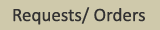
<style>
.page{position:relative;width:160px;height:30px;background:#cfc9ab}
.page>*{position:absolute;margin:0}
.t1{font:19px "Calibri";color:#333232}
</style>
<div class="page">
<p class="t1" style="left:13px;top:7px;width:132px;height:18px">Requests/ Orders</p>
</div>
